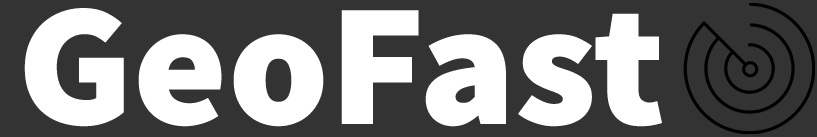
<style>
.page{position:relative;width:817px;height:137px;background:#333333}
.page>*{position:absolute;margin:0}
.t1{font:175px "SourceSansPro-Black";color:#ffffff;scale:1.03 1}
</style>
<div class="page">
<p class="t1" style="left:24px;top:8px;width:638px;height:119px">GeoFast</p>
</div>
